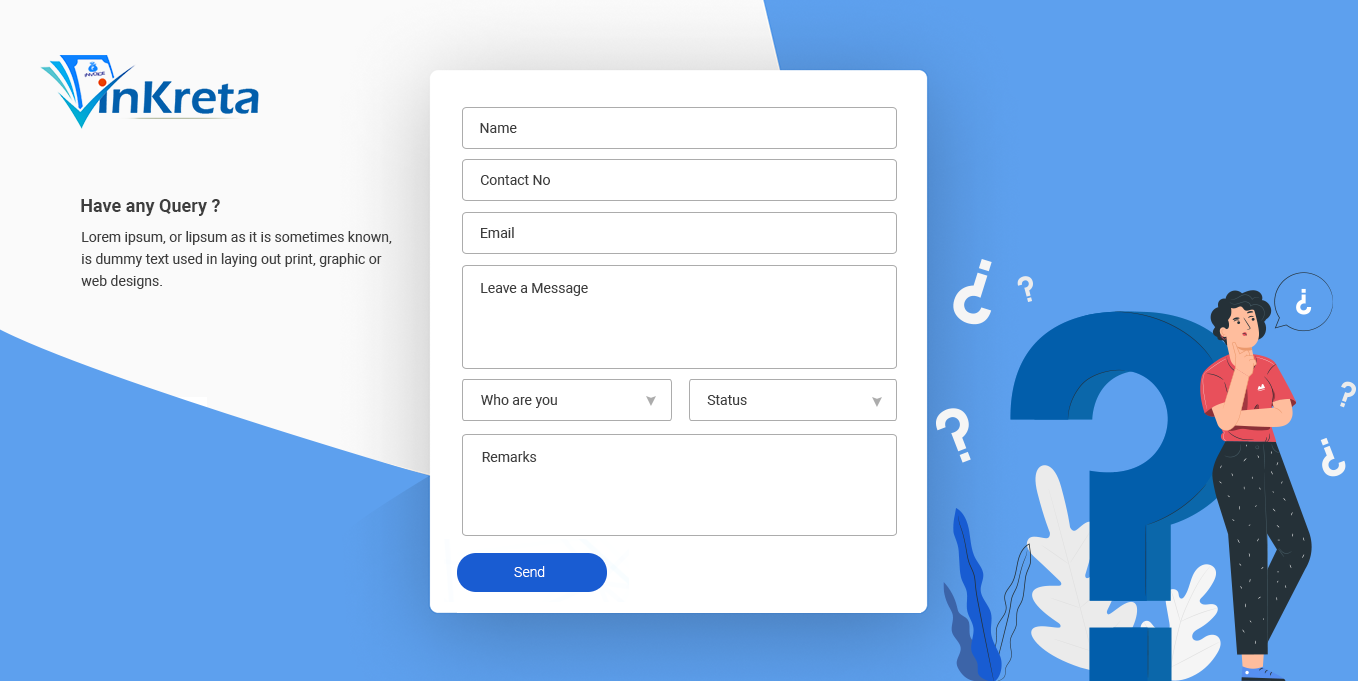
<style>
.page{position:relative;width:1358px;height:681px;background:#ffffff}
.page>*{position:absolute;margin:0}
.t1{font:14px "Roboto-Regular";color:#3e3e3e}
.t2{font:18px "Roboto-Bold";color:#3e3e3e}
.t3{font:14px/22px "Roboto-Regular";color:#3e3e3e}
.t4{font:14px "Roboto-Light";color:#ffffff}
</style>
<div class="page">
<p class="t1" style="left:480px;top:123px;width:37px;height:10px">Name</p>
<p class="t1" style="left:480px;top:175px;width:70px;height:10px">Contact No</p>
<p class="t2" style="left:81px;top:199px;width:139px;height:17px">Have any Query ?</p>
<p class="t3" style="left:81px;top:231px;width:311px;height:58px">Lorem ipsum, or lipsum as it is sometimes known, is dummy text used in laying out print, graphic or web designs.</p>
<p class="t1" style="left:481px;top:227px;width:33px;height:11px">Email</p>
<p class="t1" style="left:481px;top:283px;width:107px;height:13px">Leave a Message</p>
<p class="t1" style="left:481px;top:394px;width:76px;height:14px">Who are you</p>
<p class="t1" style="left:707px;top:395px;width:40px;height:10px">Status</p>
<p class="t1" style="left:482px;top:451px;width:55px;height:11px">Remarks</p>
<p class="t4" style="left:514px;top:566px;width:31px;height:11px">Send</p>
</div>
